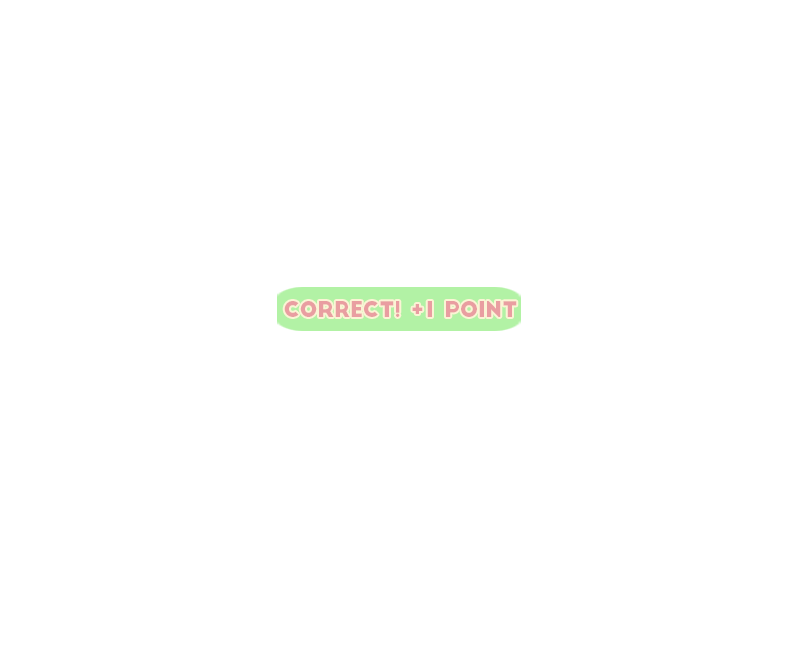
<style>
.page{position:relative;width:800px;height:650px;background:#ffffff}
.page>*{position:absolute;margin:0}
.t1{font:21.2px "BigJohn";color:#e99ea1}
</style>
<div class="page">
<p class="t1" style="left:284px;top:301px;width:233px;height:16px">Correct! +1 Point</p>
</div>
